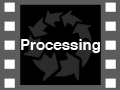
<style>
.page{position:relative;width:120px;height:90px;background:#000000}
.page>*{position:absolute;margin:0}
.t1{font:15px "Helvetica-Bold";color:#ffffff}
</style>
<div class="page">
<p class="t1" style="left:21px;top:39px;width:79px;height:14px">Processing</p>
</div>
